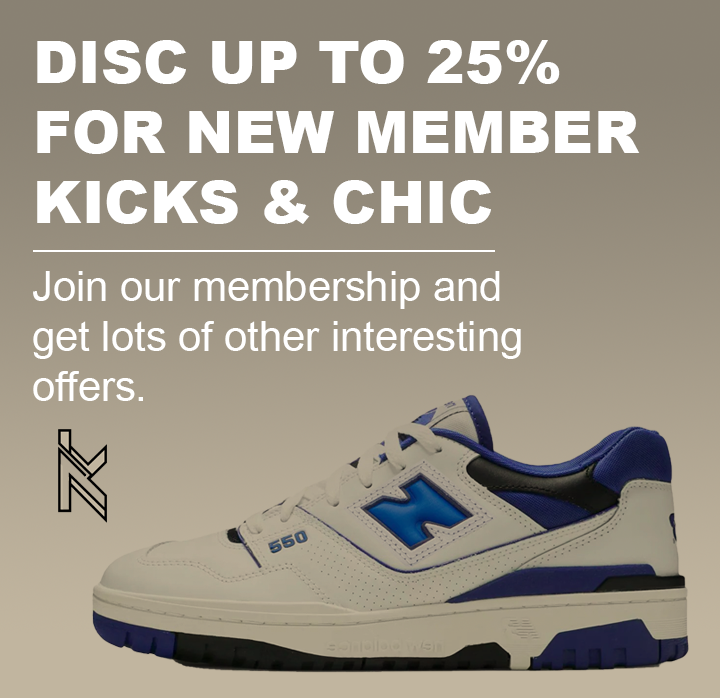
<style>
.page{position:relative;width:720px;height:698px}
.page>*{position:absolute;margin:0}
.t1{font:58.3px "Arial-Black";color:#ffffff}
.t2{font:41.7px "ArialMT";color:#ffffff}
</style>
<div class="page">
<p class="t1" style="left:37px;top:40px;width:603px;height:184px">DISC UP TO 25%<br>FOR NEW MEMBER<br>KICKS &amp; CHIC</p>
<p class="t2" style="left:33px;top:271px;width:488px;height:130px">Join our membership and<br>get lots of other interesting<br>offers.</p>
</div>
